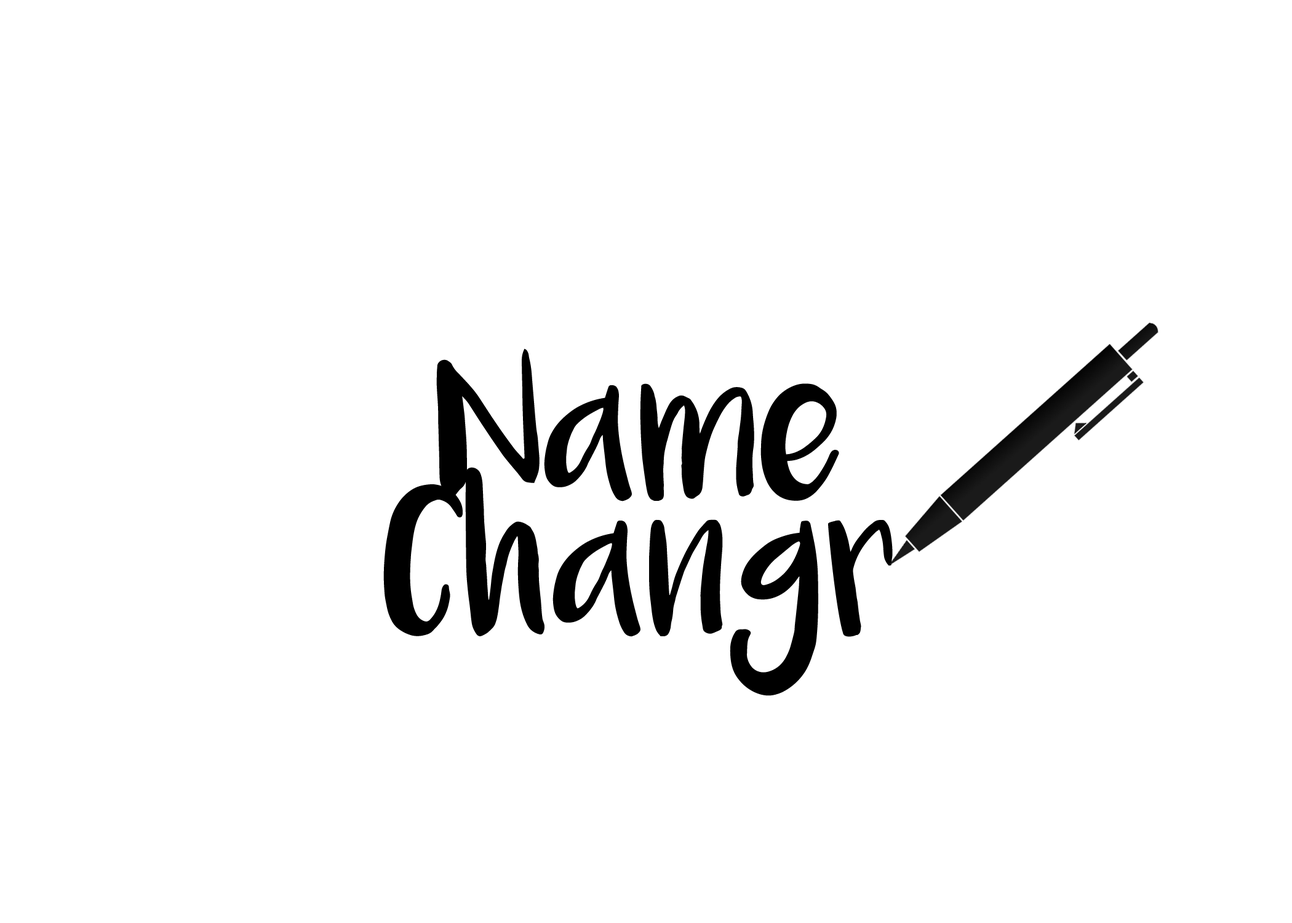
<style>
.page{position:relative;width:1292px;height:923px;background:#ffffff}
.page>*{position:absolute;margin:0}
.t1{font:112.9px "Luna";color:#000000}
</style>
<div class="page">
<p class="t1" style="left:383px;top:348px;width:510px;height:348px;text-align:center">Name<br>Changr</p>
</div>
